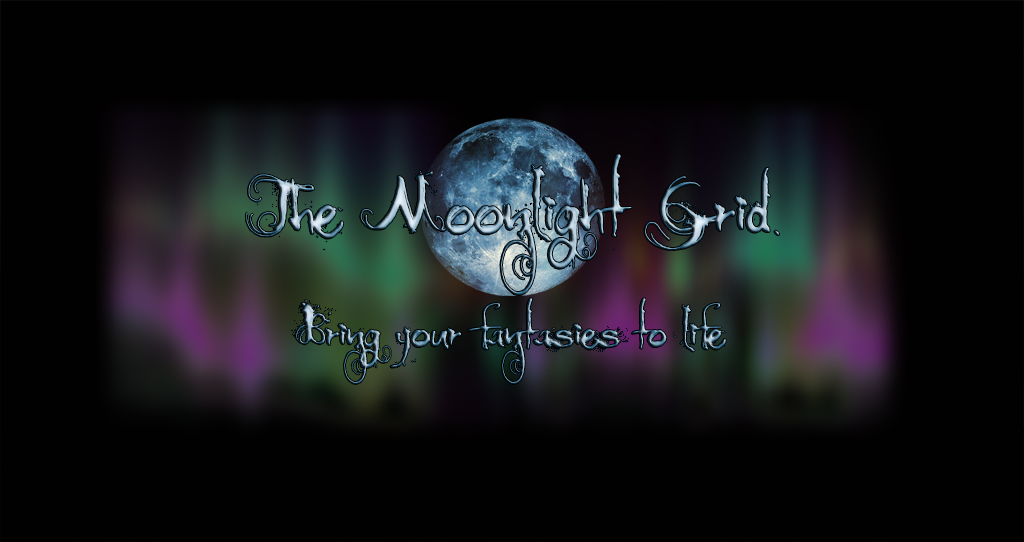
<style>
.page{position:relative;width:1024px;height:542px;background:#020101}
.page>*{position:absolute;margin:0}
.t1{font:65px "MoonlightShadow";scale:0.9 1}
.t2{font:39.5px "MoonlightShadow";scale:0.94 1}
</style>
<div class="page">
<p class="t1" style="left:246px;top:154px;width:533px;height:141px;text-align:center">The Moonlight Grid</p>
<p class="t2" style="left:291px;top:298px;width:435px;height:86px;text-align:center">Bring your fantasies to life</p>
</div>
